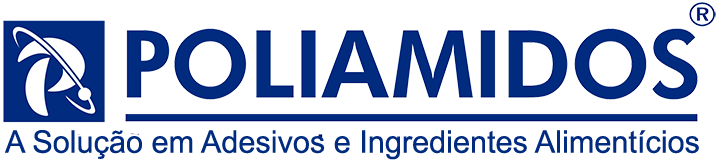
<style>
.page{position:relative;width:718px;height:164px;background:#ffffff}
.page>*{position:absolute;margin:0}
.t1{font:31.1px "ArialMT";color:#012b7f}
</style>
<div class="page">
<p class="t1" style="left:5px;top:130px;width:694px;height:30px">A Solução em Adesivos e Ingredientes Alimentícios</p>
</div>
